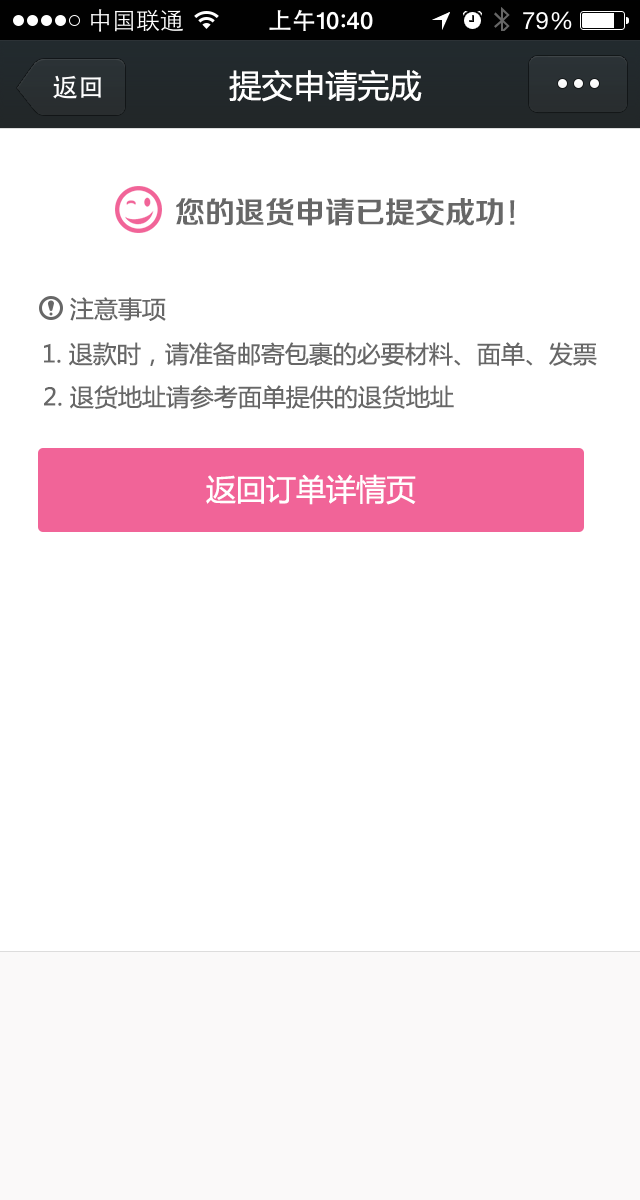
<style>
.page{position:relative;width:640px;height:1200px;background:#ffffff}
.page>*{position:absolute;margin:0}
.t1{font:32px "MicrosoftYaHei";color:#ffffff}
.t2{font:30px "FZZZHONGJW--GB1-0";color:#676767}
.t3{font:24px "MicrosoftYaHei";color:#676767}
.t4{font:30px "MicrosoftYaHei";color:#ffffff}
</style>
<div class="page">
<p class="t1" style="left:229px;top:70px;width:193px;height:32px">提交申请完成</p>
<p class="t2" style="left:176px;top:198px;width:339px;height:28px">您的退货申请已提交成功！</p>
<p class="t3" style="left:70px;top:297px;width:96px;height:24px">注意事项</p>
<p class="t3" style="left:44px;top:342px;width:553px;height:24px">1. 退款时，请准备邮寄包裹的必要材料、面单、发票</p>
<p class="t3" style="left:44px;top:385px;width:410px;height:24px">2. 退货地址请参考面单提供的退货地址</p>
<p class="t4" style="left:206px;top:474px;width:210px;height:31px">返回订单详情页</p>
</div>
